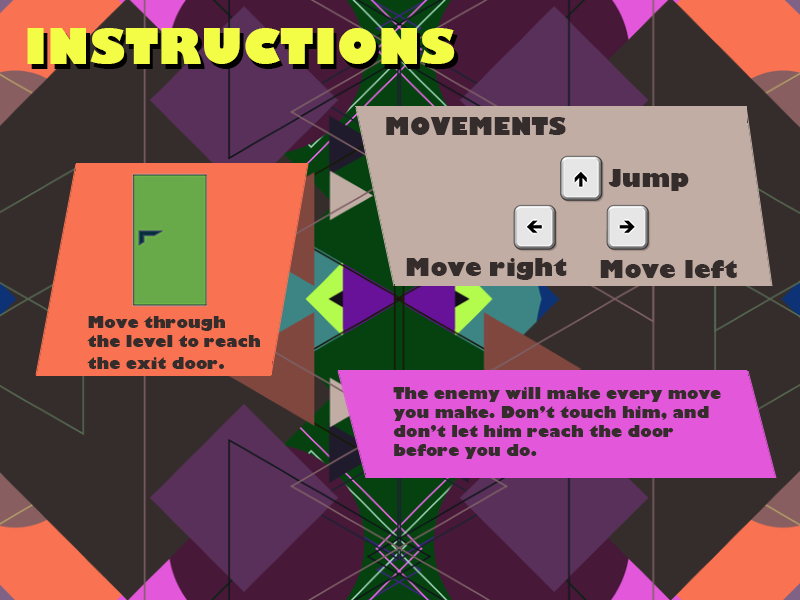
<style>
.page{position:relative;width:800px;height:600px;background:#352d2b}
.page>*{position:absolute;margin:0}
.t1{font:48px "GillSans-UltraBold";color:#f4fd46}
.t2{font:24px "GillSans-UltraBold";color:#352d2b}
.t3{font:16px "GillSans-UltraBold";color:#352d2b}
</style>
<div class="page">
<p class="t1" style="left:27px;top:28px;width:428px;height:36px">INSTRUCTIONS</p>
<p class="t2" style="left:386px;top:117px;width:180px;height:18px">MOVEMENTS</p>
<p class="t2" style="left:608px;top:169px;width:81px;height:22px">Jump</p>
<p class="t2" style="left:406px;top:258px;width:161px;height:22px">Move right</p>
<p class="t2" style="left:600px;top:260px;width:137px;height:18px">Move left</p>
<p class="t3" style="left:87px;top:316px;width:173px;height:53px">Move through <br>the level to reach <br>the exit door.</p>
<p class="t3" style="left:393px;top:387px;width:328px;height:72px">The enemy will make every move <br>you make. Don’t touch him, and <br>don’t let him reach the door <br>before you do.</p>
</div>
